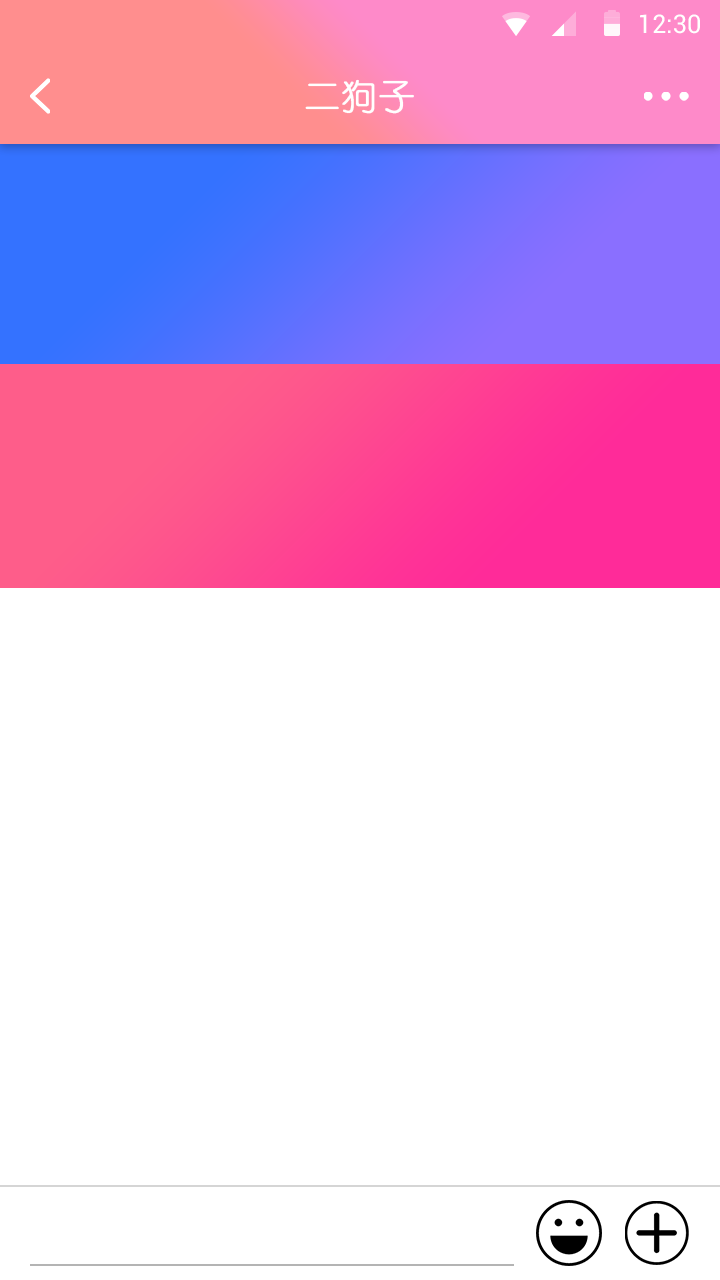
<style>
.page{position:relative;width:720px;height:1280px;background:#ffffff}
.page>*{position:absolute;margin:0}
.t1{font:25.4px "Roboto-Regular";color:#ffffff}
.t2{font:36px "YouYuan";color:#fffefe;font-weight:bold}
</style>
<div class="page">
<p class="t1" style="left:640px;top:14px;width:60px;height:20px">12:30</p>
<p class="t2" style="left:305px;top:79px;width:109px;height:35px">二狗子</p>
</div>
